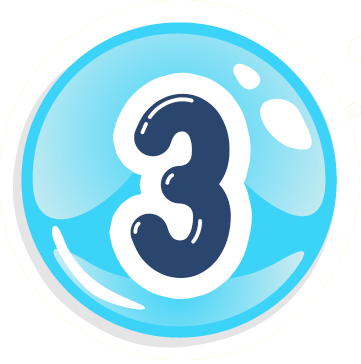
<style>
.page{position:relative;width:361px;height:364px;background:#ffffff}
.page>*{position:absolute;margin:0}
.t1{font:262.5px "BubbleBobble";color:#2a456e}
</style>
<div class="page">
<p class="t1" style="left:130px;top:93px;width:101px;height:185px">3</p>
</div>
